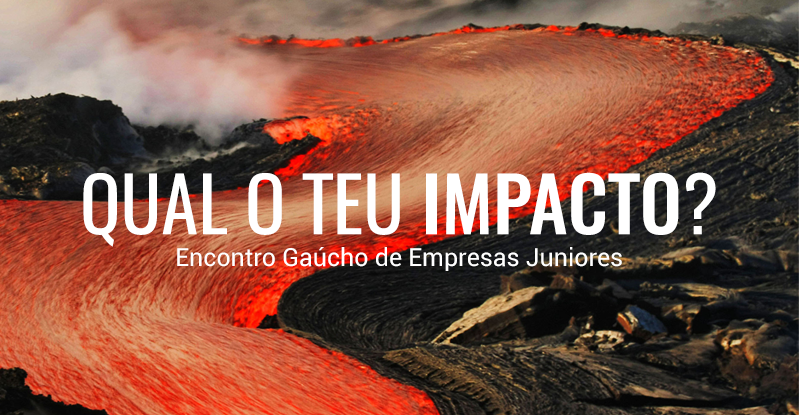
<style>
.page{position:relative;width:799px;height:415px}
.page>*{position:absolute;margin:0}
.t1{font:75px "Oswald-Regular";color:#ffffff}
.t2{font:75px "Oswald-Medium";color:#ffffff}
.t3{font:25px "Roboto-Regular";color:#ffffff}
</style>
<div class="page">
<p class="t1" style="left:83px;top:172px;width:633px;height:75px">QUAL O TEU <span class="t2">IMPACTO</span>?</p>
<p class="t3" style="left:177px;top:247px;width:445px;height:24px">Encontro Gaúcho de Empresas Juniores</p>
</div>
